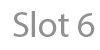
<style>
.page{position:relative;width:100px;height:50px;background:#ffffff}
.page>*{position:absolute;margin:0}
.t1{font:36px "MyriadPro-Regular";color:#909090}
</style>
<div class="page">
<p class="t1" style="left:13px;top:11px;width:82px;height:26px">Slot 6</p>
</div>
